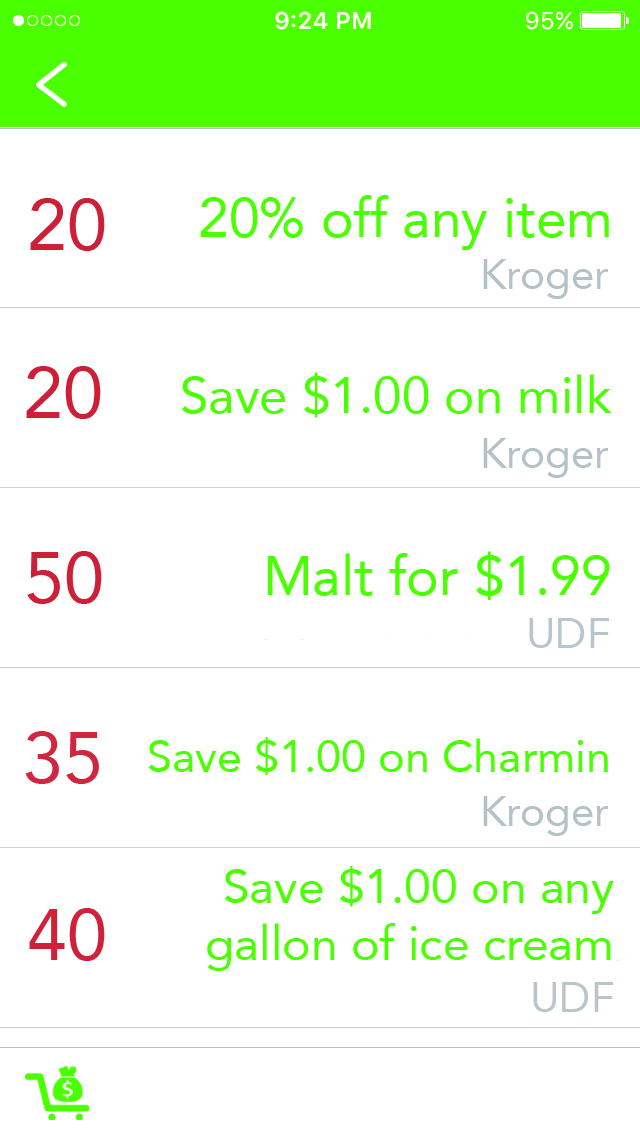
<style>
.page{position:relative;width:640px;height:1136px;background:#ffffff}
.page>*{position:absolute;margin:0}
.t1{font:72px "Avenir-Roman";color:#ce1f39}
.t2{font:55px "Avenir-Roman";color:#4aff00}
.t3{font:42px "Avenir-Roman";color:#b4c2c8}
.t4{font:51.2px "Avenir-Roman";color:#4aff00}
.t5{font:42px "Avenir-Roman";color:#b8c5cb}
.t6{font:72px "Avenir-Roman";color:#d02740}
.t7{font:44.7px "Avenir-Roman";color:#4aff00}
.t8{font:48px "Avenir-Roman";color:#4aff00}
.t9{font:72px "Avenir-Roman";color:#cf223a}
</style>
<div class="page">
<p class="t1" style="left:30px;top:198px;width:75px;height:53px">20</p>
<p class="t2" style="left:200px;top:195px;width:409px;height:55px">20% off any item</p>
<p class="t3" style="left:483px;top:259px;width:126px;height:40px">Kroger</p>
<p class="t1" style="left:26px;top:366px;width:75px;height:53px">20</p>
<p class="t4" style="left:181px;top:372px;width:431px;height:46px">Save $1.00 on milk</p>
<p class="t3" style="left:483px;top:438px;width:126px;height:40px">Kroger</p>
<p class="t1" style="left:27px;top:551px;width:75px;height:53px">50</p>
<p class="t2" style="left:267px;top:551px;width:343px;height:49px">Malt for $1.99</p>
<p class="t5" style="left:529px;top:618px;width:81px;height:30px">UDF</p>
<p class="t6" style="left:25px;top:731px;width:74px;height:53px">35</p>
<p class="t7" style="left:148px;top:737px;width:460px;height:38px">Save $1.00 on Charmin</p>
<p class="t3" style="left:483px;top:796px;width:126px;height:40px">Kroger</p>
<p class="t8" style="left:207px;top:866px;width:407px;height:105px;text-align:right">Save $1.00 on any<br> gallon of ice cream</p>
<p class="t9" style="left:29px;top:908px;width:76px;height:53px">40</p>
<p class="t5" style="left:533px;top:982px;width:81px;height:30px">UDF</p>
</div>
